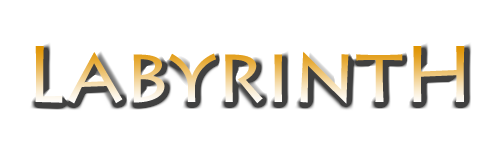
<style>
.page{position:relative;width:500px;height:150px;background:#ffffff}
.page>*{position:absolute;margin:0}
.t1{font:80px "LithosPro-Regular"}
</style>
<div class="page">
<p class="t1" style="left:35px;top:46px;width:430px;height:58px">LabyrintH</p>
</div>
